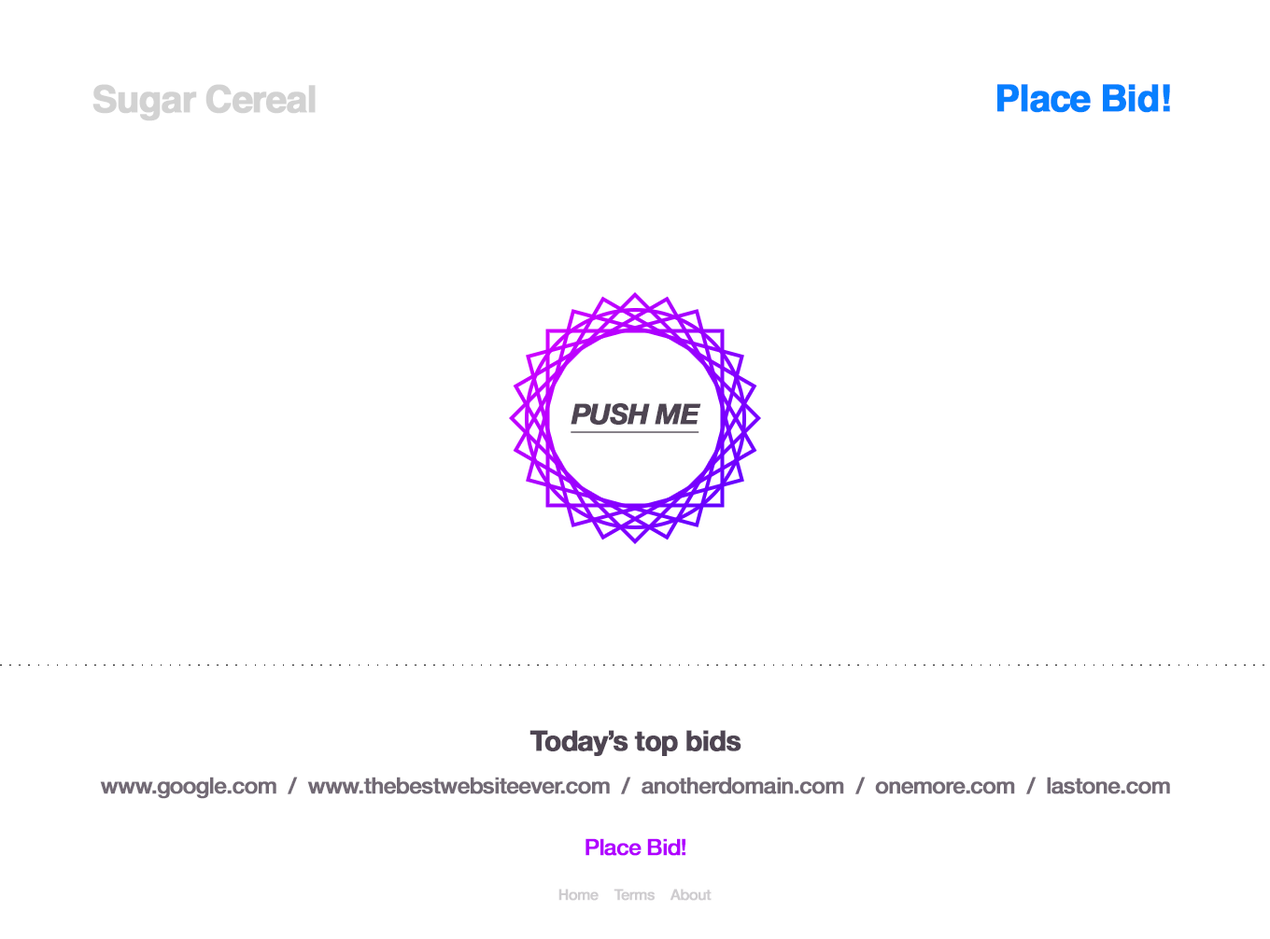
<style>
.page{position:relative;width:1270px;height:939px;background:#ffffff}
.page>*{position:absolute;margin:0}
.t1{font:37.3px "Helvetica-Bold";letter-spacing:-0.04em;color:#d2d2d2;font-weight:bold}
.t2{font:37.3px "Helvetica-Bold";letter-spacing:-0.04em;color:#077fff;font-weight:bold}
.t3{font:28px "HelveticaNeue-BoldItalic";letter-spacing:-0.04em;color:#4e4552;font-weight:bold;text-decoration:underline}
.t4{font:28px "HelveticaNeue-Bold";letter-spacing:-0.04em;color:#4e4552;font-weight:bold}
.t5{font:22.4px "HelveticaNeue-Medium";letter-spacing:-0.04em;color:#726a75;font-weight:bold}
.t6{font:22.4px "HelveticaNeue-Medium";letter-spacing:-0.04em;color:#b100ff;font-weight:bold}
.t7{font:14.9px "HelveticaNeue-Medium";letter-spacing:-0.04em;color:#cecccf;font-weight:bold}
</style>
<div class="page">
<p class="t1" style="left:92px;top:84px;width:224px;height:37px">Sugar Cereal</p>
<p class="t2" style="left:997px;top:84px;width:173px;height:29px">Place Bid!</p>
<p class="t3" style="left:570px;top:403px;width:131px;height:30px">PUSH ME</p>
<p class="t4" style="left:529px;top:730px;width:212px;height:26px">Today’s top bids</p>
<p class="t5" style="left:100px;top:777px;width:1070px;height:22px">www.google.com  /  www.thebestwebsiteever.com  /  anotherdomain.com  /  onemore.com  /  lastone.com</p>
<p class="t6" style="left:585px;top:838px;width:100px;height:18px">Place Bid!</p>
<p class="t7" style="left:558px;top:889px;width:153px;height:12px">Home    Terms    About</p>
</div>
